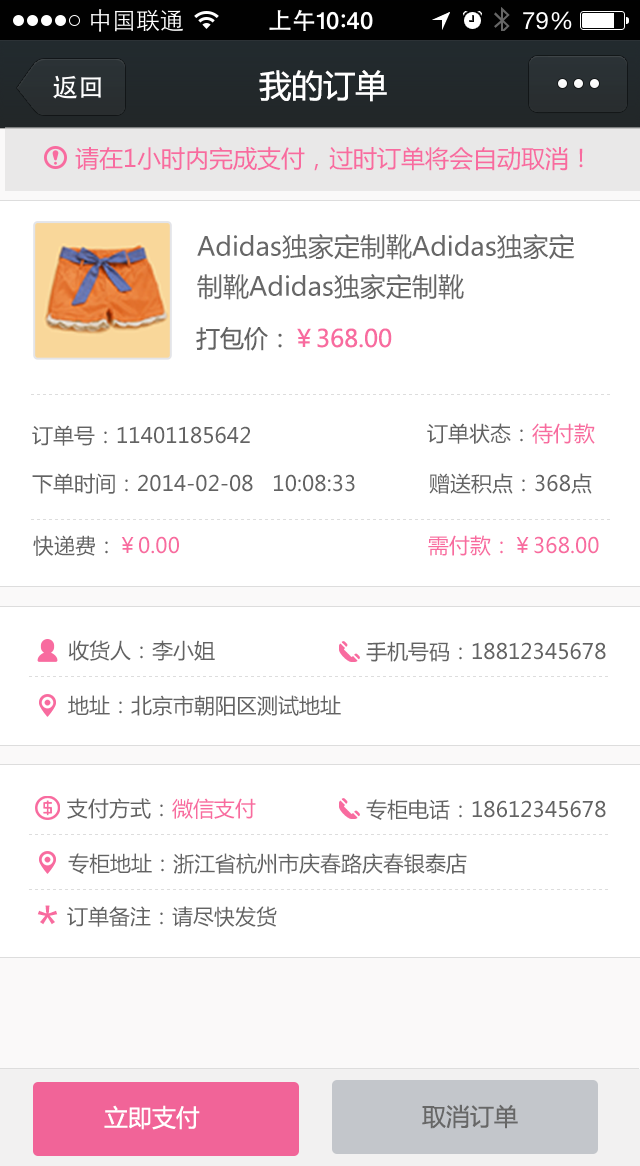
<style>
.page{position:relative;width:640px;height:1166px;background:#ffffff}
.page>*{position:absolute;margin:0}
.t1{font:32px "MicrosoftYaHei";color:#ffffff}
.t2{font:24px "MicrosoftYaHei";color:#f86b9f}
.t3{font:26px/40px "MicrosoftYaHei";color:#676767}
.t4{font:24px "MicrosoftYaHei";color:#636363}
.t5{font:6px "SimSun";color:#dddddd}
.t6{font:21px "MicrosoftYaHei";color:#636363}
.t7{font:21px "MicrosoftYaHei";color:#f86b9f}
.t8{font:50.9px "MicrosoftYaHei";color:#f86b9f}
.t9{font:24px "MicrosoftYaHei";color:#ffffff}
.t10{font:24px "MicrosoftYaHei";color:#676767}
</style>
<div class="page">
<p class="t1" style="left:259px;top:70px;width:128px;height:32px">我的订单</p>
<p class="t2" style="left:75px;top:146px;width:508px;height:25px">请在1小时内完成支付，过时订单将会自动取消！</p>
<p class="t3" style="left:197px;top:233px;width:378px;height:67px">Adidas独家定制靴Adidas独家定制靴Adidas独家定制靴</p>
<p class="t2" style="left:196px;top:326px;width:196px;height:25px"><span class="t4">打包价：</span>￥368.00</p>
<p class="t5" style="left:31px;top:394px;width:579px;height:1px">- - - - - - - - - - - - - - - - - - - - - - - - - - - - - - - - - - - - - - - - - - - - - - - - - - - - - - - - - - - - - - - - - - - - - - - - - - - - - - - - - - - - - - - - - - - - - - - - -</p>
<p class="t6" style="left:32px;top:425px;width:218px;height:21px">订单号：11401185642</p>
<p class="t6" style="left:427px;top:423px;width:168px;height:21px">订单状态：<span class="t7">待付款</span></p>
<p class="t6" style="left:32px;top:473px;width:323px;height:21px">下单时间：2014-02-08   10:08:33</p>
<p class="t6" style="left:429px;top:473px;width:163px;height:21px">赠送积点：368点</p>
<p class="t5" style="left:31px;top:519px;width:579px;height:1px">- - - - - - - - - - - - - - - - - - - - - - - - - - - - - - - - - - - - - - - - - - - - - - - - - - - - - - - - - - - - - - - - - - - - - - - - - - - - - - - - - - - - - - - - - - - - - - - - -</p>
<p class="t7" style="left:33px;top:535px;width:146px;height:21px"><span class="t6">快递费：</span>￥0.00</p>
<p class="t7" style="left:428px;top:535px;width:171px;height:21px">需付款：￥368.00</p>
<p class="t6" style="left:68px;top:640px;width:147px;height:21px">收货人：李小姐</p>
<p class="t6" style="left:366px;top:641px;width:240px;height:21px">手机号码：18812345678</p>
<p class="t5" style="left:29px;top:676px;width:579px;height:1px">- - - - - - - - - - - - - - - - - - - - - - - - - - - - - - - - - - - - - - - - - - - - - - - - - - - - - - - - - - - - - - - - - - - - - - - - - - - - - - - - - - - - - - - - - - - - - - - - -</p>
<p class="t6" style="left:68px;top:695px;width:273px;height:21px">地址：北京市朝阳区测试地址</p>
<p class="t6" style="left:67px;top:798px;width:189px;height:21px">支付方式：<span class="t7">微信支付</span></p>
<p class="t6" style="left:366px;top:799px;width:240px;height:21px">专柜电话：18612345678</p>
<p class="t5" style="left:29px;top:834px;width:579px;height:1px">- - - - - - - - - - - - - - - - - - - - - - - - - - - - - - - - - - - - - - - - - - - - - - - - - - - - - - - - - - - - - - - - - - - - - - - - - - - - - - - - - - - - - - - - - - - - - - - - -</p>
<p class="t6" style="left:68px;top:853px;width:399px;height:21px">专柜地址：浙江省杭州市庆春路庆春银泰店</p>
<p class="t5" style="left:29px;top:889px;width:579px;height:1px">- - - - - - - - - - - - - - - - - - - - - - - - - - - - - - - - - - - - - - - - - - - - - - - - - - - - - - - - - - - - - - - - - - - - - - - - - - - - - - - - - - - - - - - - - - - - - - - - -</p>
<p class="t8" style="left:37px;top:905px;width:21px;height:20px">*</p>
<p class="t6" style="left:67px;top:906px;width:210px;height:21px">订单备注：请尽快发货</p>
<p class="t9" style="left:104px;top:1105px;width:96px;height:25px">立即支付</p>
<p class="t10" style="left:422px;top:1104px;width:96px;height:25px">取消订单</p>
</div>
